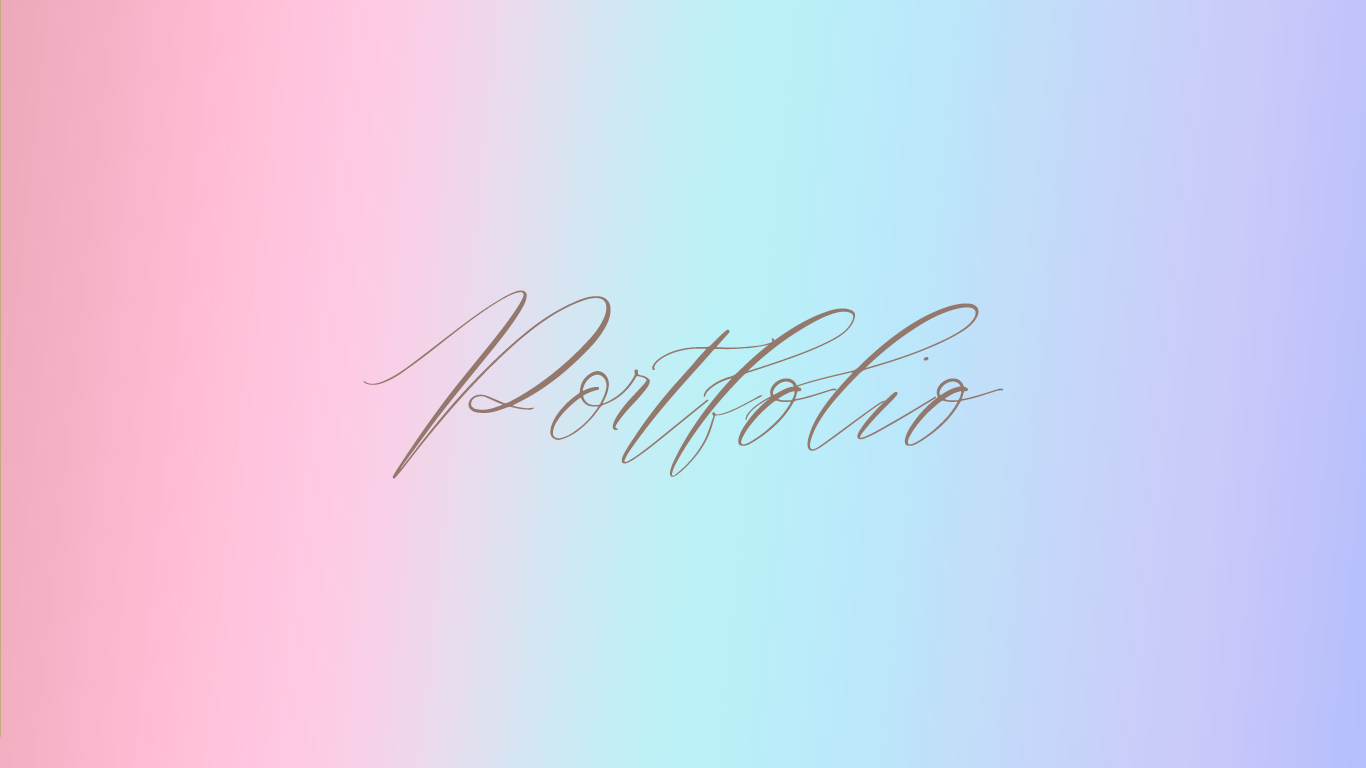
<style>
.page{position:relative;width:1366px;height:768px}
.page>*{position:absolute;margin:0}
.t1{font:200px "LaBohemienne-Regular";letter-spacing:0.02em;color:#95786c;font-style:italic}
</style>
<div class="page">
<p class="t1" style="left:363px;top:290px;width:641px;height:189px">Portfolio</p>
</div>
